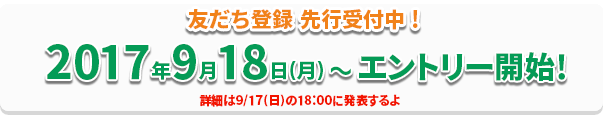
<style>
.page{position:relative;width:603px;height:115px;background:#fbfbfb}
.page>*{position:absolute;margin:0}
.t1{font:21px "GenEiGothicN-H-KL";color:#f1821a}
.t2{font:30px "GenEiGothicP-H-KL";color:#049b56}
.t3{font:42px "GenEiGothicN-H-KL";color:#049b56}
.t4{font:19.8px "GenEiGothicP-H-KL";color:#049b56}
.t5{font:42px "GenEiGothicP-H-KL";color:#049b56}
.t6{font:12px "GenEiGothicP-H-KL";color:#f21400}
</style>
<div class="page">
<p class="t1" style="left:188px;top:8px;width:230px;height:22px">友だち登録 先行受付中！</p>
<p class="t2" style="left:46px;top:44px;width:519px;height:38px"><span class="t3">2017</span><span class="t4">年</span><span class="t5">9</span><span class="t4">月</span><span class="t5">18</span><span class="t4">日(月) ～ </span>エントリー開始！</p>
<p class="t6" style="left:199px;top:94px;width:201px;height:13px">詳細は9/17(日)の18:00に発表するよ</p>
</div>
